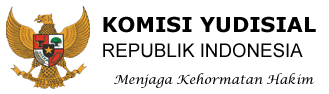
<style>
.page{position:relative;width:329px;height:94px;background:#ffffff}
.page>*{position:absolute;margin:0}
.t1{font:20.8px "Verdana-Bold";color:#000000}
.t2{font:18.8px "ArialMT";color:#000000}
.t3{font:12.5px "LucidaCalligraphy-Italic";color:#000000}
</style>
<div class="page">
<p class="t1" style="left:103px;top:16px;width:213px;height:17px">KOMISI YUDISIAL</p>
<p class="t2" style="left:103px;top:43px;width:200px;height:15px">REPUBLIK INDONESIA</p>
<p class="t3" style="left:114px;top:73px;width:200px;height:15px">Menjaga Kehormatan Hakim</p>
</div>
